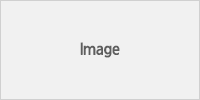
<style>
.page{position:relative;width:200px;height:100px;background:#f1f1f1}
.page>*{position:absolute;margin:0}
.t1{font:16px "NanumGothicExtraBold";letter-spacing:-0.05em;color:#5e5e5e;scale:0.95 1}
</style>
<div class="page">
<p class="t1" style="left:80px;top:42px;width:40px;height:16px">Image</p>
</div>
